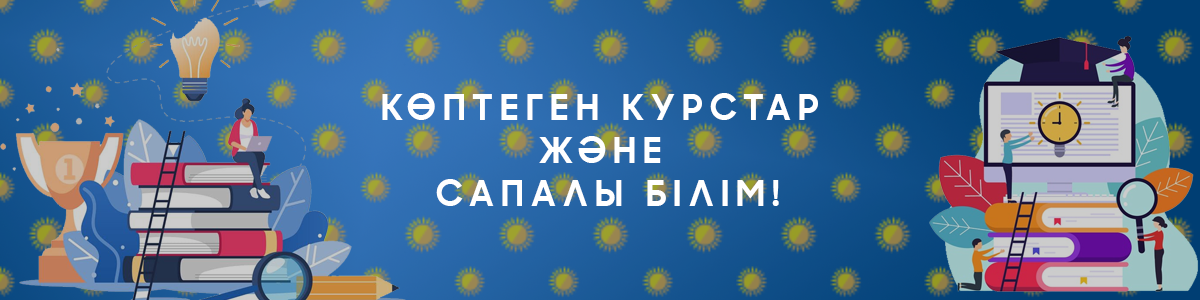
<style>
.page{position:relative;width:1200px;height:300px}
.page>*{position:absolute;margin:0}
.t1{font:36px "KZSamsungSharpSans-Bold";letter-spacing:0.2em;color:#ffffff}
</style>
<div class="page">
<p class="t1" style="left:382px;top:93px;width:436px;height:113px;text-align:center">КӨПТЕГЕН КУРСТАР <br>ЖӘНЕ <br>САПАЛЫ БІЛІМ!</p>
</div>
